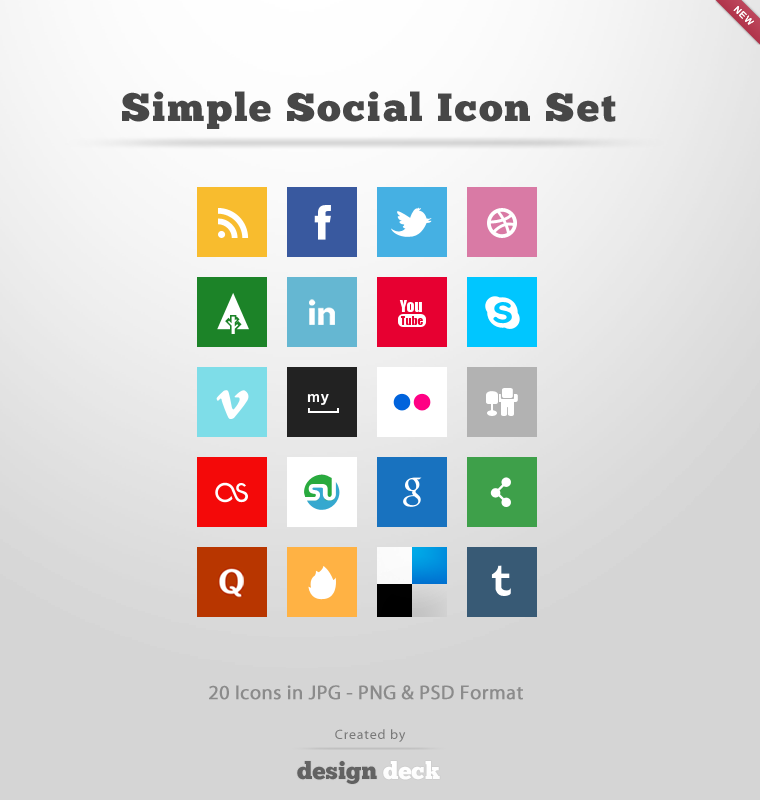
<style>
.page{position:relative;width:760px;height:800px;background:#d5d5d5}
.page>*{position:absolute;margin:0}
.t1{font:39.4px "ChunkFive";letter-spacing:0.055em;color:#474747;scale:1.04 1}
.t2{font:20px "MyriadPro-Regular";letter-spacing:0.005em;color:#8b8b8b;font-weight:bold}
.t3{font:13.4px "MyriadPro-Regular";letter-spacing:0.055em;color:#787878;scale:1.04 1}
.t4{font:24px "ChunkFive";letter-spacing:0.005em;color:#626262}
.t5{font:24px "ChunkFive";letter-spacing:0.005em;color:#ffffff}
</style>
<div class="page">
<p class="t1" style="left:122px;top:91px;width:494px;height:38px">Simple Social Icon Set</p>
<p class="t2" style="left:209px;top:685px;width:314px;height:15px">20 Icons in JPG - PNG &amp; PSD Format</p>
<p class="t3" style="left:335px;top:729px;width:71px;height:13px">Created by</p>
<p class="t4" style="left:297px;top:761px;width:143px;height:23px">design <span class="t5">deck</span></p>
</div>
